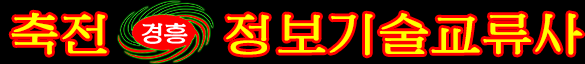
<style>
.page{position:relative;width:585px;height:64px;background:#000000}
.page>*{position:absolute;margin:0}
.t1{font:50px "WKLGwangmyong";color:#ffff00;font-weight:bold}
</style>
<div class="page">
<p class="t1" style="left:11px;top:12px;width:96px;height:43px">축전</p>
<p class="t1" style="left:226px;top:13px;width:357px;height:43px">정보기술교류사</p>
</div>
